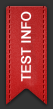
<style>
.page{position:relative;width:53px;height:109px}
.page>*{position:absolute;margin:0}
.t1{font:13px "ArialMT";color:#ffffff;font-weight:bold}
</style>
<div class="page">
<p class="t1" style="left:20px;top:11px;width:12px;height:71px;rotate:-90deg">TEST INFO</p>
</div>
